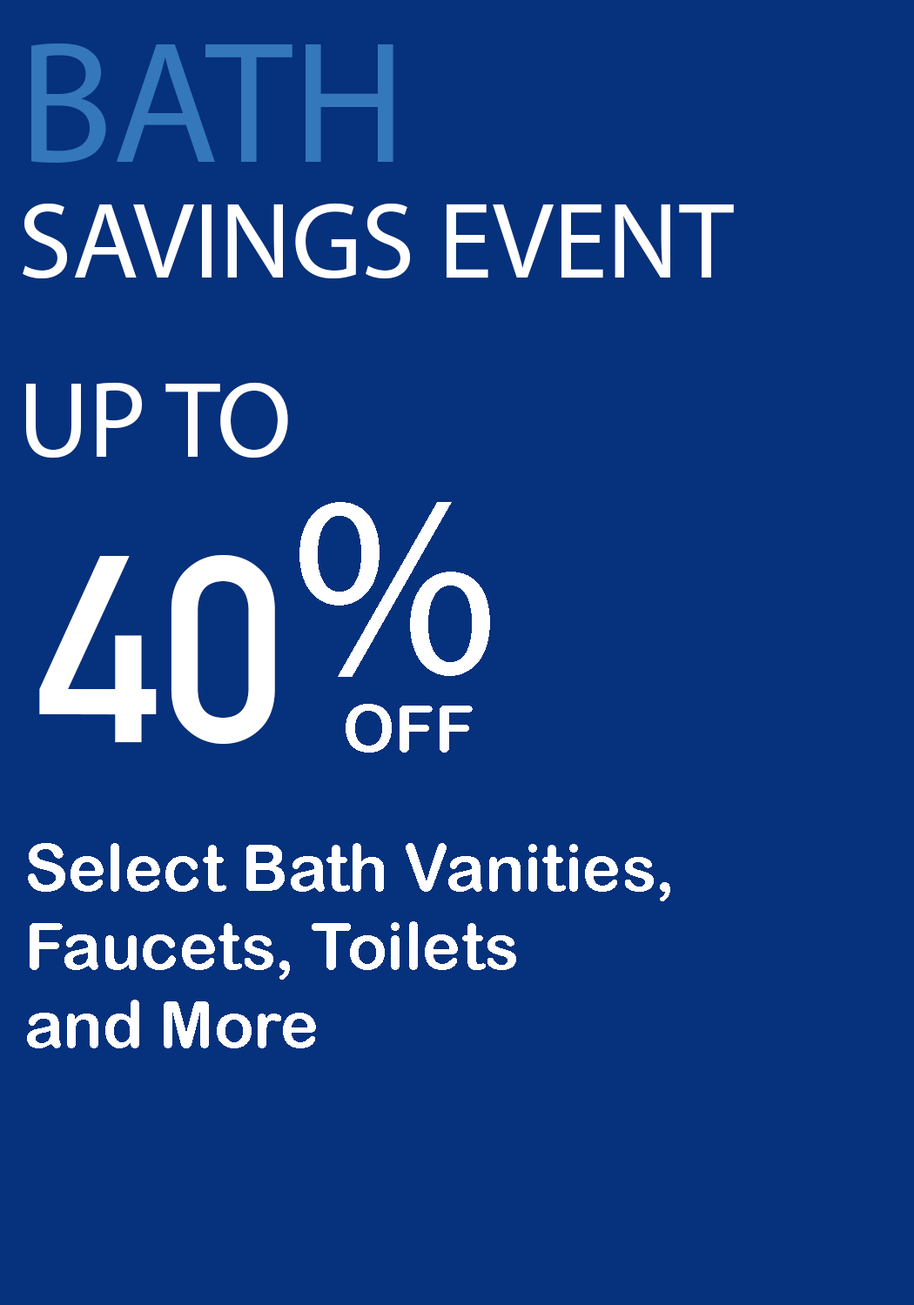
<style>
.page{position:relative;width:914px;height:1305px;background:#06317c}
.page>*{position:absolute;margin:0}
.t1{font:174px "MyriadPro-Regular";color:#3477bb}
.t2{font:108.8px "MyriadPro-Regular";color:#ffffff}
.t3{font:261px "MyriadPro-Regular";color:#ffffff}
.t4{font:261px "DINAlternate-Bold";color:#ffffff}
.t5{font:65.3px "ArialRoundedMTBold";color:#ffffff}
</style>
<div class="page">
<p class="t1" style="left:31px;top:43px;width:362px;height:120px">BATH</p>
<p class="t2" style="left:23px;top:203px;width:711px;height:75px">SAVINGS EVENT</p>
<p class="t2" style="left:26px;top:382px;width:262px;height:77px">UP TO</p>
<p class="t3" style="left:299px;top:502px;width:191px;height:175px">%</p>
<p class="t4" style="left:39px;top:555px;width:236px;height:189px">40</p>
<p class="t5" style="left:345px;top:704px;width:127px;height:49px">OFF</p>
<p class="t5" style="left:27px;top:843px;width:643px;height:205px">Select Bath Vanities,<br>Faucets, Toilets<br>and More</p>
</div>
